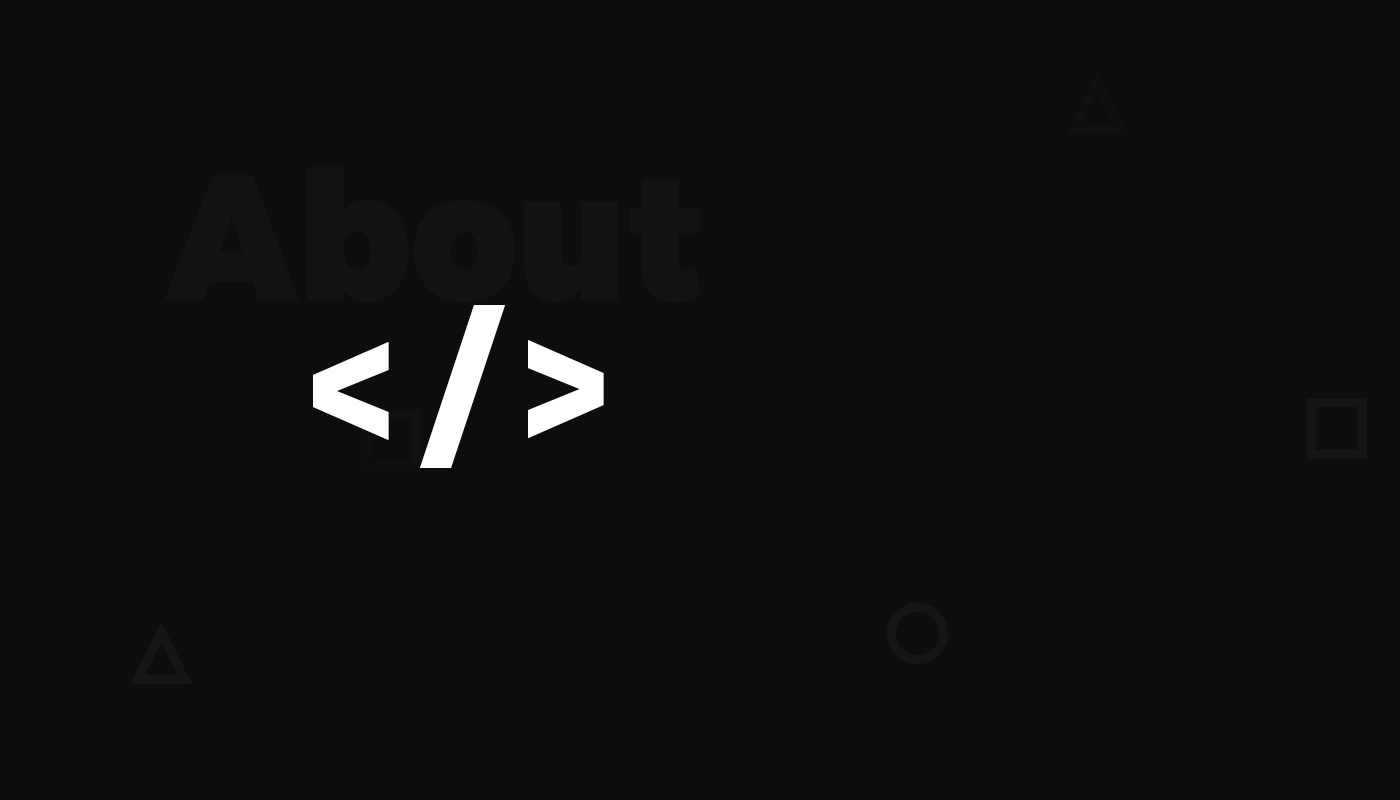
<style>
.page{position:relative;width:1400px;height:800px;background:#0d0d0d}
.page>*{position:absolute;margin:0}
.t1{font:179px "Montserrat-Black";color:#121212;scale:0.92 1}
.t2{font:179px "Montserrat-Black";color:#ffffff;scale:0.92 1}
</style>
<div class="page">
<p class="t1" style="left:164px;top:167px;width:538px;height:136px">About</p>
<p class="t2" style="left:313px;top:305px;width:291px;height:163px">&lt; / &gt;</p>
</div>
